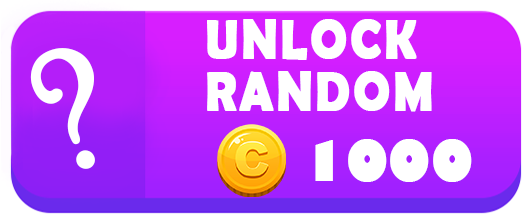
<style>
.page{position:relative;width:532px;height:224px;background:#ffffff}
.page>*{position:absolute;margin:0}
.t1{font:54.7px/52.1px "BerlinSansFBDemi-Bold";letter-spacing:0.05em;color:#ffffff;font-weight:bold;scale:0.88 1}
.t2{font:170.3px "PoorRichard-Regular";color:#ffffff;font-weight:bold;scale:0.93 1}
.t3{font:53.5px "GillSans-UltraBold";color:#ffffff;font-weight:bold;scale:0.9 1}
</style>
<div class="page">
<p class="t1" style="left:207px;top:19px;width:225px;height:93px">UNLOCK<br>RANDOM</p>
<p class="t2" style="left:30px;top:48px;width:65px;height:121px;rotate:-22deg">?</p>
<p class="t3" style="left:315px;top:139px;width:157px;height:43px">1000</p>
</div>
